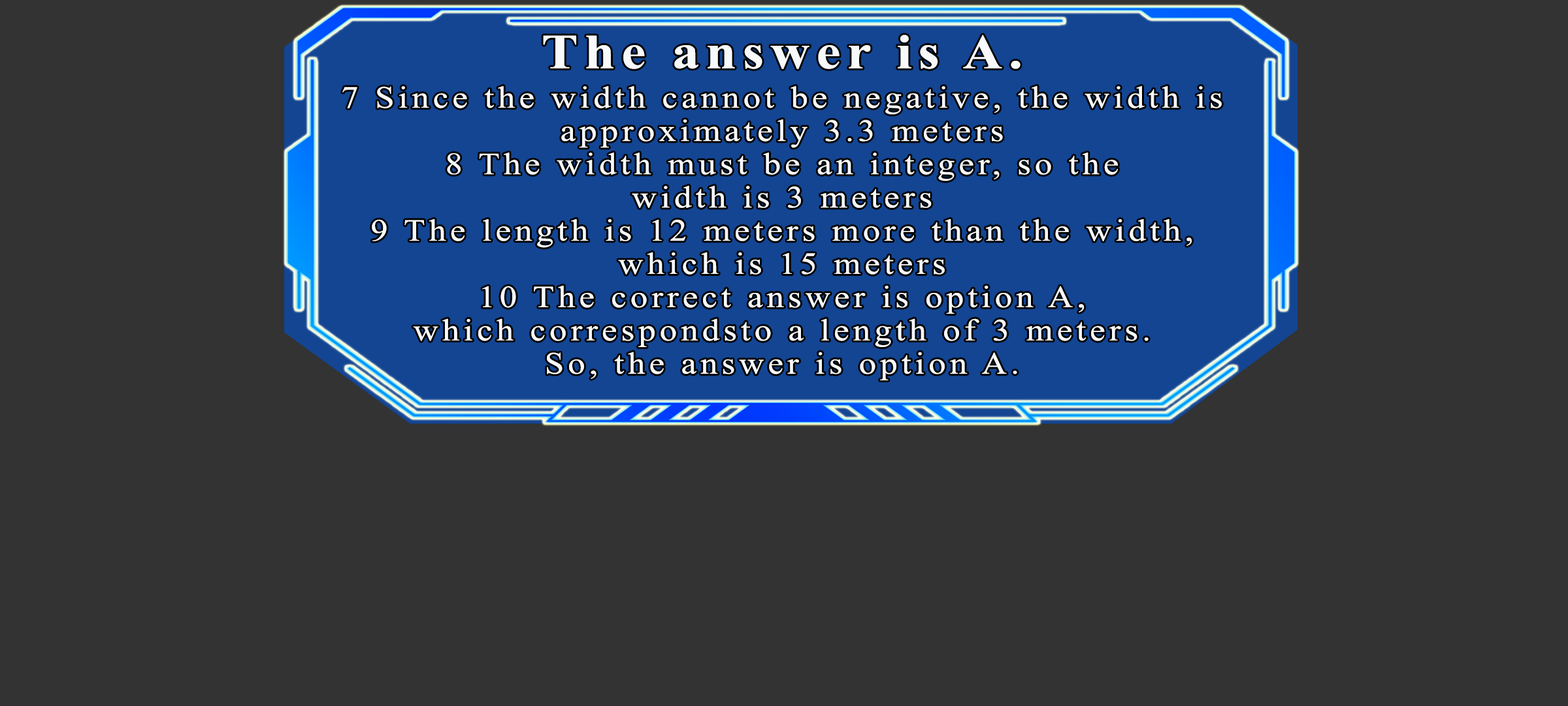
<style>
.page{position:relative;width:1568px;height:706px;background:#333333}
.page>*{position:absolute;margin:0}
.t1{font:49px "TimesNewRomanPS-BoldMT";letter-spacing:0.115em;color:#f7f9fb;scale:1.12 1}
.t2{font:30.9px/33.2px "TimesNewRomanPSMT";letter-spacing:0.115em;color:#f7f9fb;scale:1.12 1}
</style>
<div class="page">
<p class="t1" style="left:543px;top:35px;width:478px;height:34px">The answer is A.</p>
<p class="t2" style="left:342px;top:86px;width:880px;height:294px;text-align:center">7 Since the width cannot be negative, the width is<br>approximately 3.3 meters<br>8 The width must be an integer, so the<br>width is 3 meters<br>9 The length is 12 meters more than the width,<br>which is 15 meters<br>10 The correct answer is option A,<br>which correspondsto a length of 3 meters.<br>So, the answer is option A.</p>
</div>
